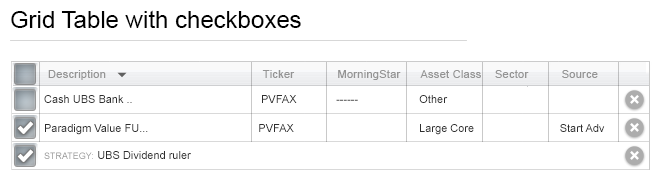
<style>
.page{position:relative;width:661px;height:181px;background:#ffffff}
.page>*{position:absolute;margin:0}
.t1{font:24px "ArialMT";color:#000000}
.t2{font:11px "ArialMT";letter-spacing:0.025em;color:#949494}
.t3{font:11px "ArialMT";color:#2e2e2e}
.t4{font:9px "ArialMT";color:#949494}
</style>
<div class="page">
<p class="t1" style="left:11px;top:10px;width:290px;height:18px">Grid Table with checkboxes</p>
<p class="t2" style="left:48px;top:70px;width:550px;height:10px">Description                                               Ticker             MorningStar      Asset Class    Sector          Source</p>
<p class="t3" style="left:44px;top:95px;width:404px;height:8px">Cash UBS Bank ..                                          PVFAX             ------                    Other</p>
<p class="t3" style="left:45px;top:124px;width:560px;height:11px">Paradigm Value FU...                                    PVFAX                                         Large Core                            Start Adv</p>
<p class="t3" style="left:44px;top:151px;width:147px;height:8px"><span class="t4">STRATEGY: </span>UBS Dividend ruler</p>
</div>
